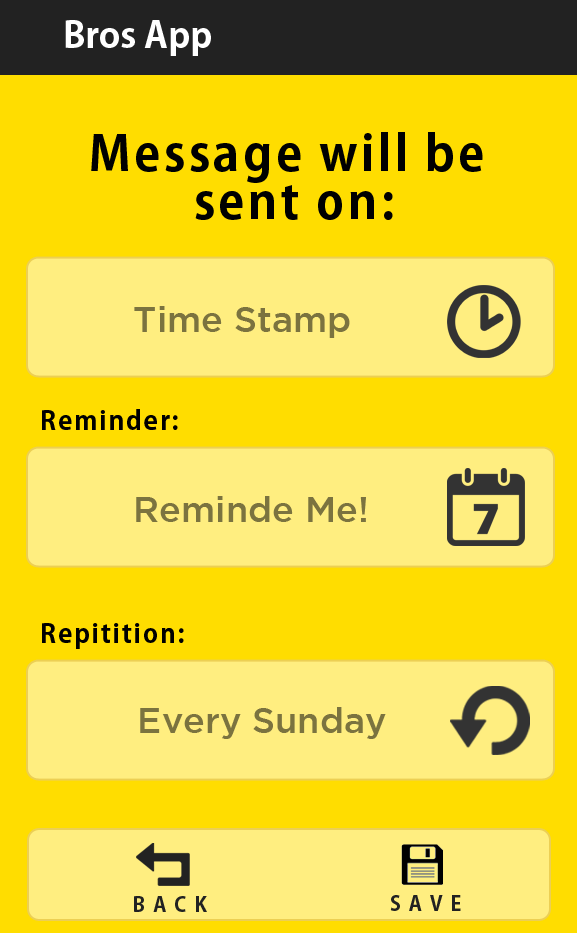
<style>
.page{position:relative;width:577px;height:933px;background:#ffdd00}
.page>*{position:absolute;margin:0}
.t1{font:36px "AdobeGothicStd-Bold";color:#ffffff}
.t2{font:48px/48px "AdobeGothicStd-Bold";letter-spacing:0.07em;color:#000000}
.t3{font:36px "GothamMedium";color:#7b733f}
.t4{font:26px "AdobeGothicStd-Bold";letter-spacing:0.07em;color:#000000}
.t5{font:20px "AdobeGothicStd-Bold";letter-spacing:0.4em;color:#222222}
</style>
<div class="page">
<p class="t1" style="left:65px;top:20px;width:146px;height:36px">Bros App</p>
<p class="t2" style="left:91px;top:132px;width:392px;height:88px;text-align:center">Message will be<br> sent on:</p>
<p class="t3" style="left:134px;top:306px;width:216px;height:32px">Time Stamp</p>
<p class="t4" style="left:42px;top:409px;width:136px;height:21px">Reminder:</p>
<p class="t3" style="left:136px;top:496px;width:230px;height:26px">Reminde Me!</p>
<p class="t4" style="left:42px;top:623px;width:142px;height:26px">Repitition:</p>
<p class="t3" style="left:140px;top:707px;width:246px;height:32px">Every Sunday</p>
<p class="t5" style="left:134px;top:896px;width:73px;height:16px">BACK</p>
<p class="t5" style="left:390px;top:895px;width:71px;height:16px">SAVE</p>
</div>
